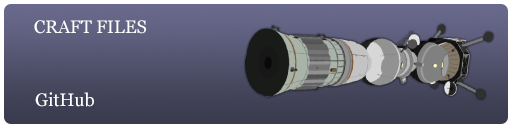
<style>
.page{position:relative;width:512px;height:128px}
.page>*{position:absolute;margin:0}
.t1{font:18px "Georgia";color:#ffffff}
</style>
<div class="page">
<p class="t1" style="left:34px;top:20px;width:112px;height:14px">CRAFT FILES</p>
<p class="t1" style="left:35px;top:92px;width:59px;height:15px">GitHub</p>
</div>
